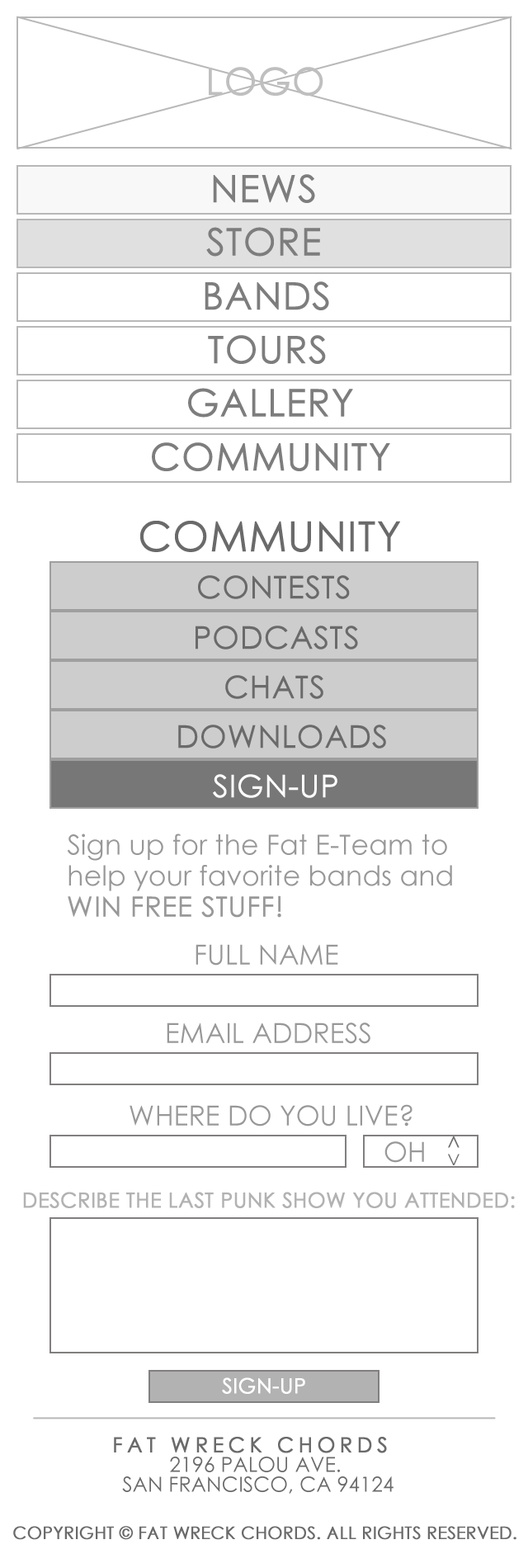
<style>
.page{position:relative;width:528px;height:1568px;background:#ffffff}
.page>*{position:absolute;margin:0}
.t1{font:37.8px "CenturyGothic";color:#bfbfbf;text-transform:uppercase;font-weight:bold}
.t2{font:37.8px "CenturyGothic";color:#7d7d7d;text-transform:uppercase;font-weight:bold}
.t3{font:41.3px "CenturyGothic";color:#6a6a6a;text-transform:uppercase;font-weight:bold}
.t4{font:30.9px "CenturyGothic";color:#6a6a6a;text-transform:uppercase;font-weight:bold}
.t5{font:30.9px "CenturyGothic";color:#ffffff;text-transform:uppercase;font-weight:bold}
.t6{font:27.5px/30.9px "CenturyGothic";color:#989898}
.t7{font:27.5px/30.9px "CenturyGothic";color:#989898;text-transform:uppercase;font-weight:bold}
.t8{font:27.5px "CenturyGothic";color:#989898;text-transform:uppercase}
.t9{font:20.6px "CenturyGothic";color:#6f6f6f;text-transform:uppercase}
.t10{font:20.6px "CenturyGothic";color:#b2b2b2;text-transform:uppercase;font-weight:bold}
.t11{font:20.6px "CenturyGothic";color:#ffffff;text-transform:uppercase;font-weight:bold}
.t12{font:20.6px/19.8px "CenturyGothic";color:#6a6a6a;text-transform:uppercase}
.t13{font:20.6px/19.8px "CenturyGothic";letter-spacing:0.2em;color:#6a6a6a;text-transform:uppercase;font-weight:bold}
.t14{font:17.2px "CenturyGothic";color:#6a6a6a;text-transform:uppercase;font-weight:bold}
</style>
<div class="page">
<p class="t1" style="left:209px;top:67px;width:115px;height:29px">logo</p>
<p class="t2" style="left:213px;top:174px;width:102px;height:29px">news</p>
<p class="t2" style="left:206px;top:227px;width:114px;height:30px">store</p>
<p class="t2" style="left:205px;top:281px;width:124px;height:29px">bands</p>
<p class="t2" style="left:208px;top:335px;width:118px;height:29px">tours</p>
<p class="t2" style="left:188px;top:388px;width:165px;height:30px">gallery</p>
<p class="t2" style="left:152px;top:442px;width:238px;height:29px">community</p>
<p class="t3" style="left:140px;top:521px;width:260px;height:31px">COMMUNITY</p>
<p class="t4" style="left:198px;top:575px;width:152px;height:24px">contests</p>
<p class="t4" style="left:196px;top:626px;width:162px;height:23px">podcasts</p>
<p class="t4" style="left:225px;top:675px;width:99px;height:24px">chats</p>
<p class="t4" style="left:178px;top:725px;width:208px;height:24px">downloads</p>
<p class="t5" style="left:213px;top:774px;width:125px;height:24px">sign-up</p>
<p class="t6" style="left:67px;top:834px;width:385px;height:84px">Sign up for the Fat E-Team to <br>help your favorite bands and <br><span class="t7">win free stuff!</span></p>
<p class="t8" style="left:196px;top:944px;width:142px;height:22px">full name</p>
<p class="t8" style="left:167px;top:1023px;width:204px;height:21px">email address</p>
<p class="t8" style="left:130px;top:1104px;width:283px;height:22px">where do you live?</p>
<p class="t8" style="left:385px;top:1141px;width:39px;height:22px">oh</p>
<p class="t9" style="left:448px;top:1136px;width:12px;height:12px">^</p>
<p class="t9" style="left:448px;top:1154px;width:12px;height:11px;rotate:180deg">^</p>
<p class="t10" style="left:23px;top:1192px;width:492px;height:16px">DESCRIBE THE LAST PUNK SHOW YOU ATTENDED:</p>
<p class="t11" style="left:222px;top:1377px;width:83px;height:17px">sign-up</p>
<p class="t12" style="left:114px;top:1437px;width:280px;height:57px;text-align:center"><span class="t13">FAT WRECK CHORDS  <br></span>2196 Palou Ave. <br>San Francisco, CA 94124</p>
<p class="t14" style="left:13px;top:1526px;width:504px;height:14px">Copyright © Fat Wreck Chords. All rights reserved.</p>
</div>
